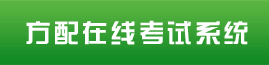
<style>
.page{position:relative;width:269px;height:65px}
.page>*{position:absolute;margin:0}
.t1{font:25.7px "FZZYJW--GB1-0";letter-spacing:0.1em;color:#ffffff}
</style>
<div class="page">
<p class="t1" style="left:26px;top:20px;width:222px;height:25px">方配在线考试系统</p>
</div>
